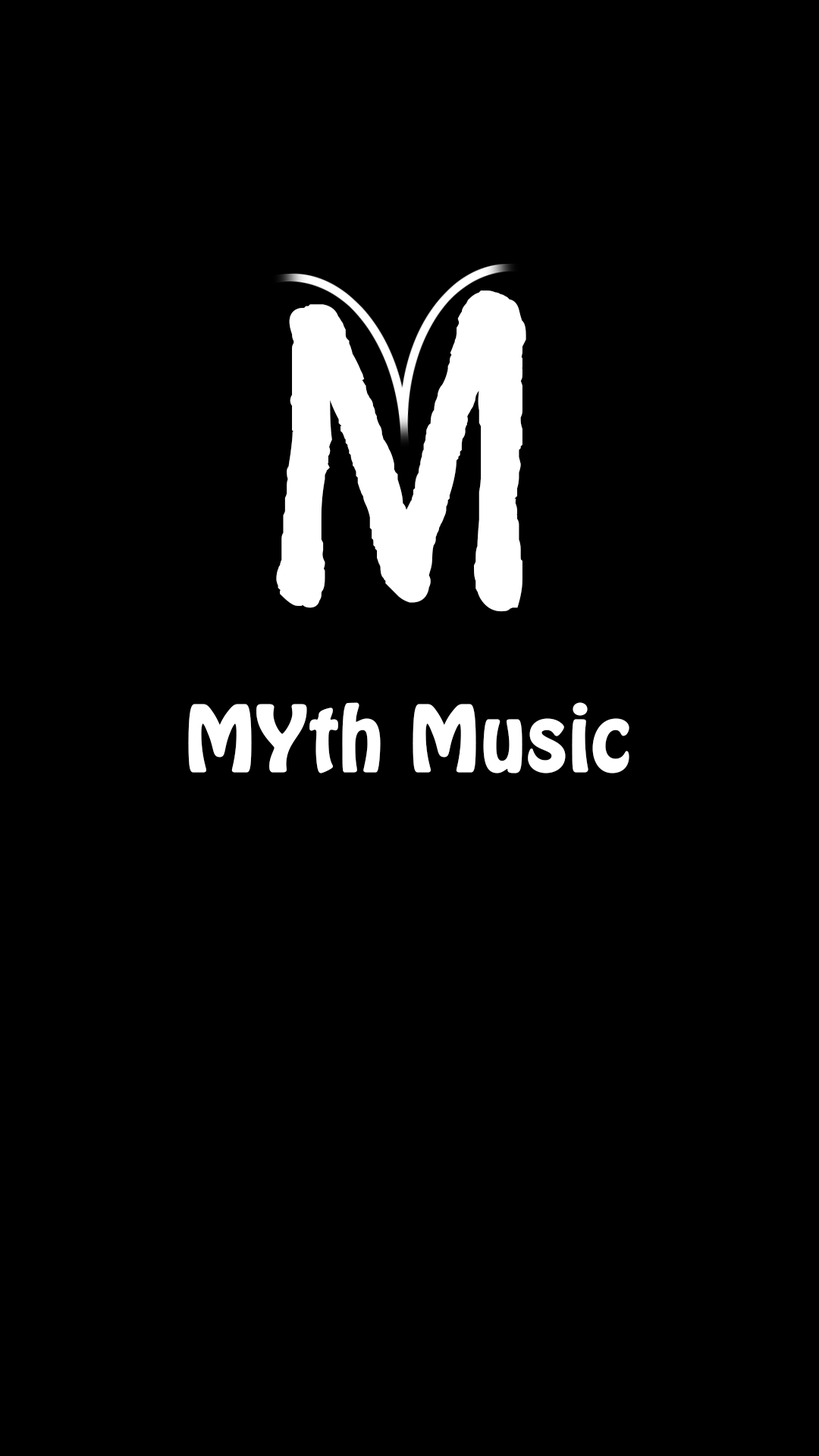
<style>
.page{position:relative;width:819px;height:1456px;background:#000000}
.page>*{position:absolute;margin:0}
.t1{font:443.9px "FZDCJW--GB1-0";color:#ffffff;font-weight:bold}
.t2{font:78.9px "HoboStd";color:#ffffff;font-weight:bold}
</style>
<div class="page">
<p class="t1" style="left:276px;top:290px;width:250px;height:322px">M</p>
<p class="t2" style="left:188px;top:702px;width:441px;height:71px">MYth Music</p>
</div>
